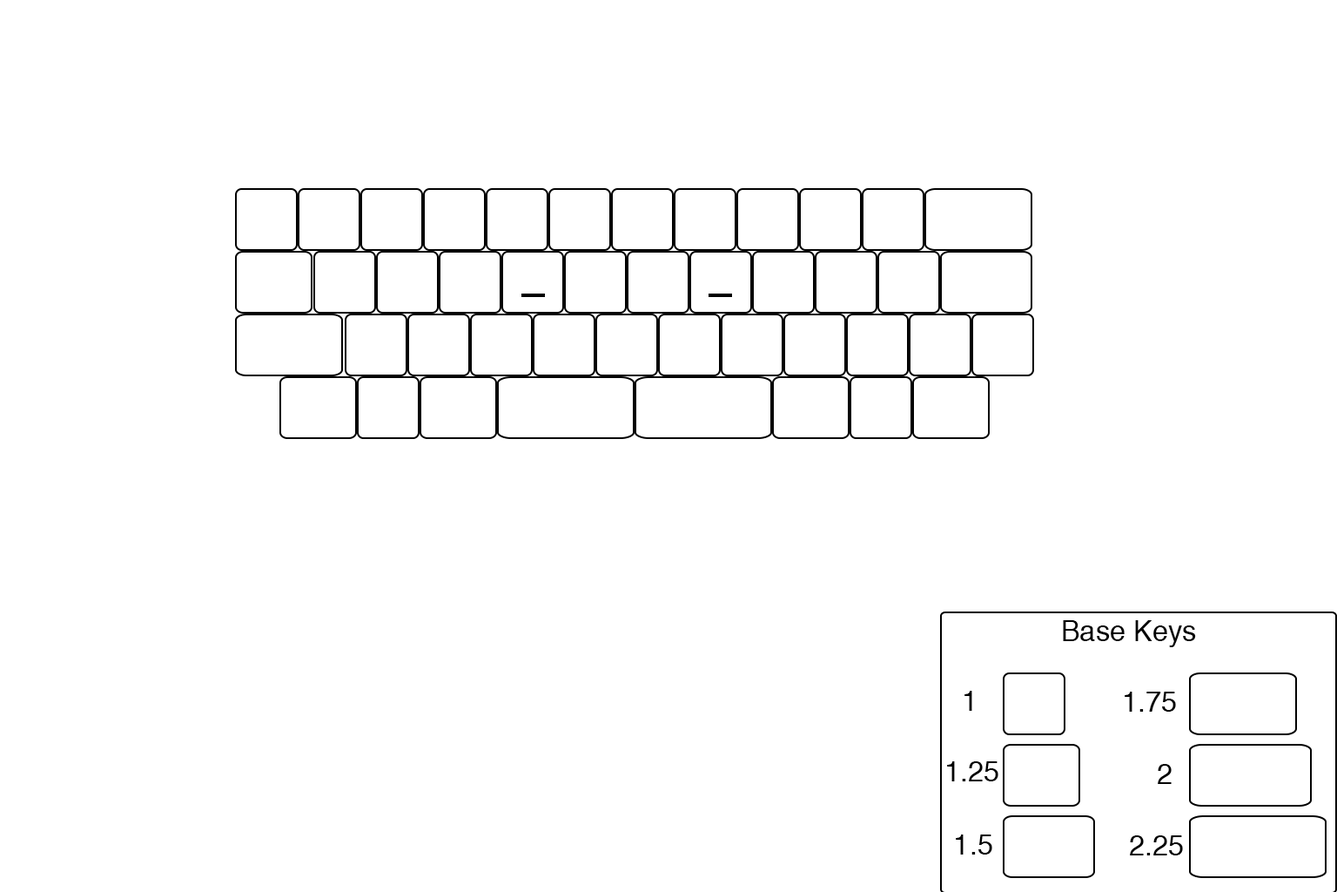
<style>
.page{position:relative;width:1337px;height:892px;background:#ffffff}
.page>*{position:absolute;margin:0}
.t1{font:28.3px "Helvetica";color:#000000}
</style>
<div class="page">
<p class="t1" style="left:1063px;top:620px;width:133px;height:27px">Base Keys</p>
<p class="t1" style="left:965px;top:690px;width:8px;height:20px">1</p>
<p class="t1" style="left:1125px;top:691px;width:51px;height:20px">1.75</p>
<p class="t1" style="left:947px;top:761px;width:52px;height:20px">1.25</p>
<p class="t1" style="left:1158px;top:764px;width:14px;height:20px">2</p>
<p class="t1" style="left:956px;top:834px;width:37px;height:20px">1.5</p>
<p class="t1" style="left:1130px;top:835px;width:53px;height:20px">2.25</p>
</div>
